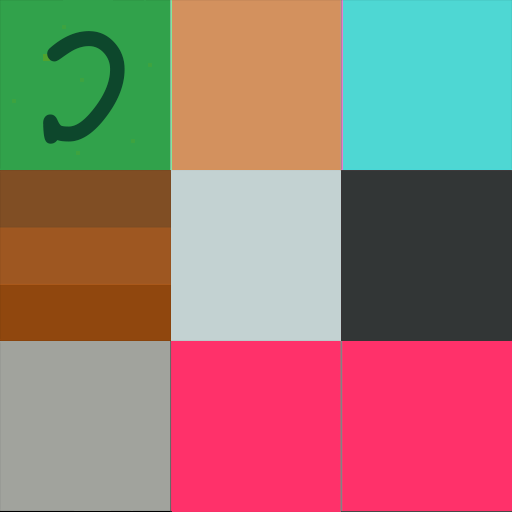
<style>
.page{position:relative;width:512px;height:512px;background:#ff316a}
.page>*{position:absolute;margin:0}
.t1{font:149.6px "ComicSansMS";color:#0d472c}
</style>
<div class="page">
<p class="t1" style="left:43px;top:31px;width:82px;height:113px;rotate:-180deg">C</p>
</div>
